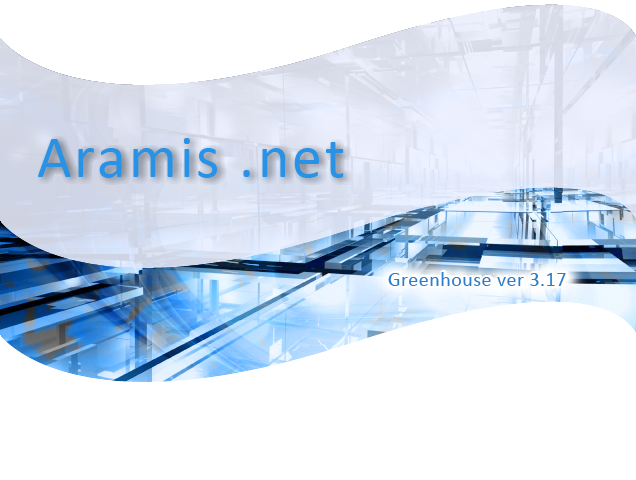
<style>
.page{position:relative;width:636px;height:480px;background:#ffffff}
.page>*{position:absolute;margin:0}
.t1{font:60px "Calibri";letter-spacing:0.05em;color:#2893e6}
.t2{font:20px "Calibri";letter-spacing:0.025em;color:#2f7dca}
</style>
<div class="page">
<p class="t1" style="left:38px;top:138px;width:306px;height:40px">Aramis .net</p>
<p class="t2" style="left:388px;top:272px;width:178px;height:14px">Greenhouse ver 3.17</p>
</div>
